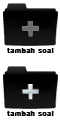
<style>
.page{position:relative;width:60px;height:124px;background:#ffffff}
.page>*{position:absolute;margin:0}
.t1{font:7px "Helvetica_cyr-Bold";letter-spacing:0.05em;color:#020202;font-weight:bold}
</style>
<div class="page">
<p class="t1" style="left:7px;top:48px;width:47px;height:5px">tambah soal</p>
<p class="t1" style="left:7px;top:111px;width:47px;height:5px">tambah soal</p>
</div>
